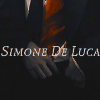
<style>
.page{position:relative;width:100px;height:100px;background:#151515}
.page>*{position:absolute;margin:0}
.t1{font:14px "AndadaSC-Regular";color:#c5c5c5;font-style:italic}
</style>
<div class="page">
<p class="t1" style="left:0px;top:45px;width:100px;height:12px">Simone De Luca</p>
</div>
